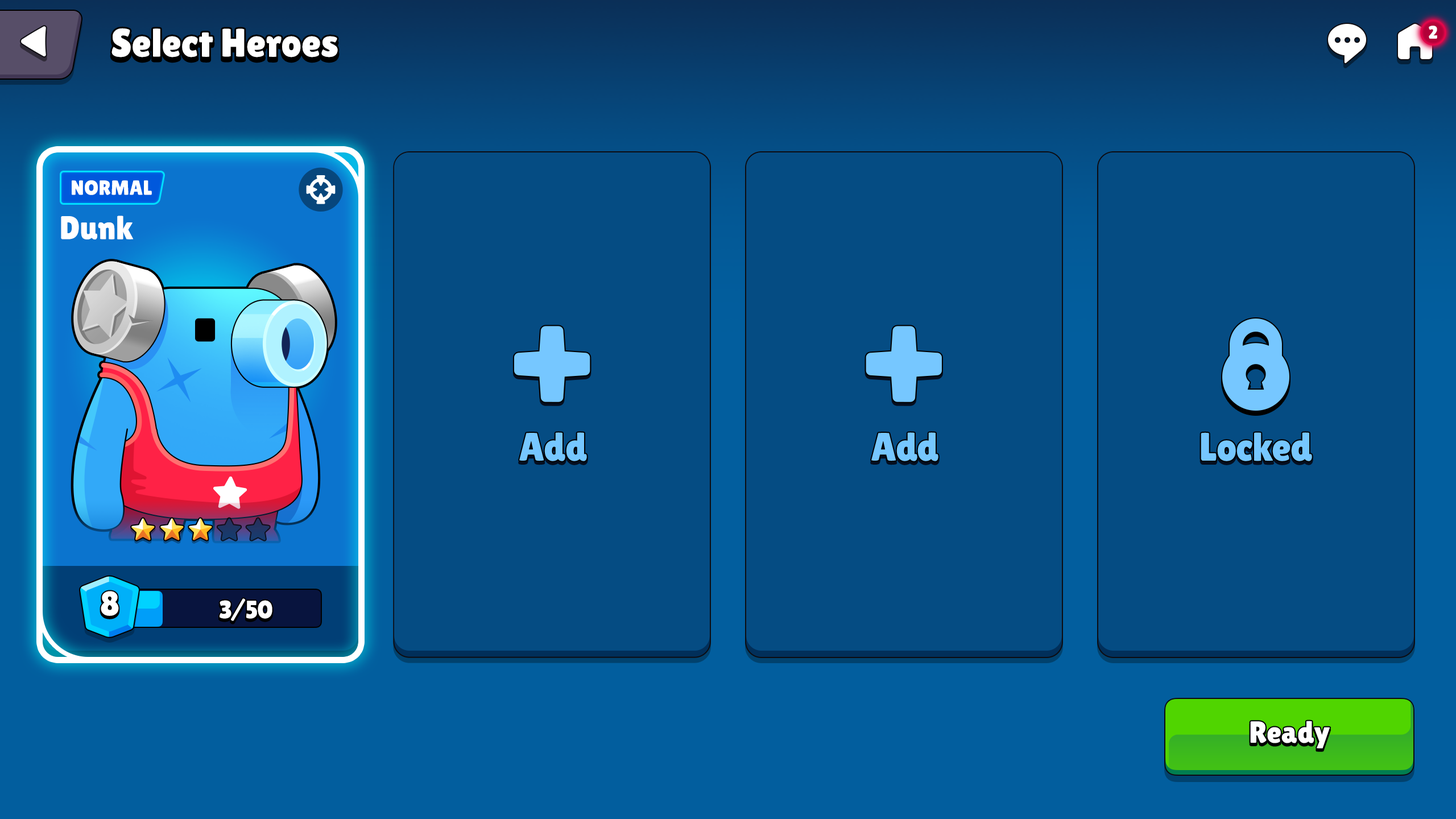
<style>
.page{position:relative;width:1456px;height:819px;background:#054c83}
.page>*{position:absolute;margin:0}
.t1{font:39.8px "LilitaOne";color:#ffffff}
.t2{font:18.2px "LilitaOne";color:#ffffff;text-transform:uppercase}
.t3{font:20.5px "LilitaOne";color:#ffffff;text-transform:uppercase}
.t4{font:33px "LilitaOne";color:#ffffff}
.t5{font:39.8px "LilitaOne";color:#76c7ff}
.t6{font:34.1px "LilitaOne";color:#ffffff;text-transform:uppercase}
.t7{font:25px "LilitaOne";color:#ffffff;text-transform:uppercase}
.t8{font:30.7px "LilitaOne";letter-spacing:0.02em;color:#ffffff}
</style>
<div class="page">
<p class="t1" style="left:111px;top:28px;width:227px;height:29px">Select Heroes</p>
<p class="t2" style="left:1429px;top:26px;width:8px;height:13px">2</p>
<p class="t3" style="left:72px;top:180px;width:80px;height:15px">Normal</p>
<p class="t4" style="left:61px;top:216px;width:73px;height:23px">Dunk</p>
<p class="t5" style="left:519px;top:432px;width:68px;height:29px">Add</p>
<p class="t5" style="left:871px;top:432px;width:67px;height:29px">Add</p>
<p class="t5" style="left:1201px;top:432px;width:111px;height:29px">Locked</p>
<p class="t6" style="left:101px;top:591px;width:18px;height:25px">8</p>
<p class="t7" style="left:220px;top:598px;width:52px;height:23px">3/50</p>
<p class="t8" style="left:1250px;top:721px;width:80px;height:27px">Ready</p>
</div>
